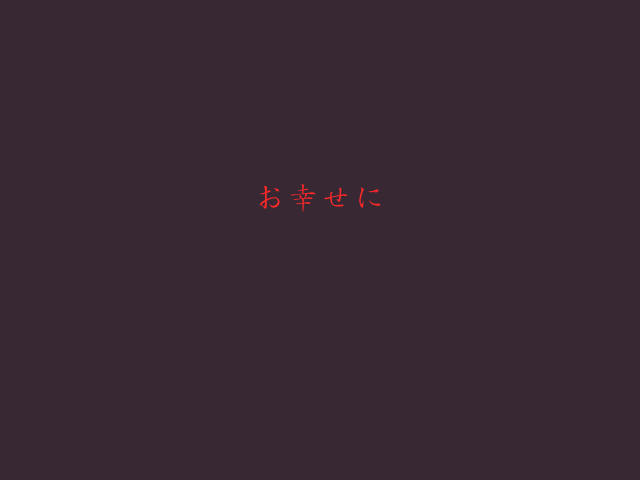
<style>
.page{position:relative;width:640px;height:480px;background:#382833}
.page>*{position:absolute;margin:0}
.t1{font:30px "DFKaiSho-Lt-WIN-RKSJ-H";letter-spacing:0.1em;color:#ff2828}
</style>
<div class="page">
<p class="t1" style="left:260px;top:184px;width:121px;height:28px">お幸せに</p>
</div>
